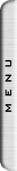
<style>
.page{position:relative;width:17px;height:171px}
.page>*{position:absolute;margin:0}
.t1{font:11px "BankGothic-Medium";letter-spacing:0.5em;color:#000000}
</style>
<div class="page">
<p class="t1" style="left:5px;top:60px;width:7px;height:52px;rotate:-90deg">MENU</p>
</div>
